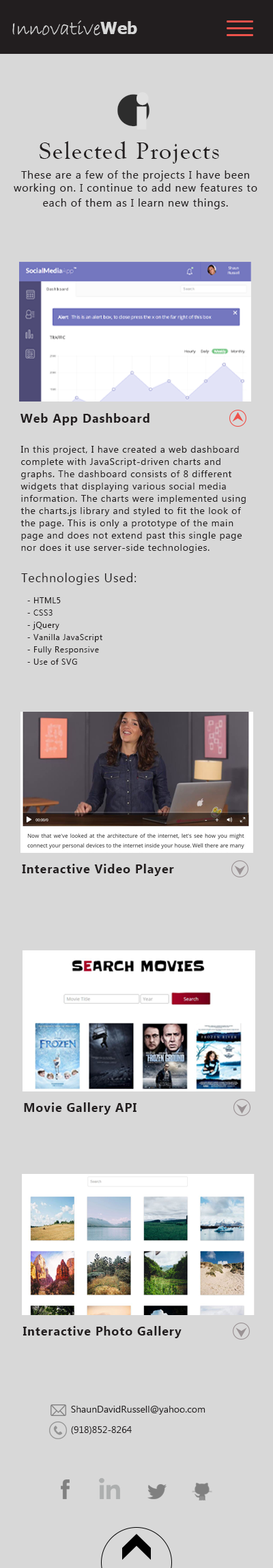
<style>
.page{position:relative;width:273px;height:1568px;background:#d8d8d8}
.page>*{position:absolute;margin:0}
.t1{font:20.5px "BradleyHandITC";color:#d8d8d8}
.t2{font:16.4px "Tahoma-Bold";color:#d8d8d8}
.t3{font:24.5px "GoudyOldStyleT-Regular";letter-spacing:0.05em;color:#221e1f}
.t4{font:10.9px "LaoUI";letter-spacing:0.05em;color:#221e1f}
.t5{font:12.3px "LaoUI-Bold";letter-spacing:0.05em;color:#221e1f}
.t6{font:9.5px/12.3px "LaoUI";letter-spacing:0.05em;color:#221e1f}
.t7{font:12.3px "LaoUI";letter-spacing:0.05em;color:#221e1f}
.t8{font:8.2px/12.3px "LaoUI";letter-spacing:0.05em;color:#221e1f}
.t9{font:9.5px/20.5px "LaoUI";color:#221e1f}
</style>
<div class="page">
<p class="t1" style="left:12px;top:20px;width:125px;height:15px">Innovative<span class="t2">Web</span></p>
<p class="t3" style="left:39px;top:141px;width:180px;height:23px">Selected Projects</p>
<p class="t4" style="left:14px;top:170px;width:243px;height:39px;text-align:center">These are a few of the projects I have been working on. I continue to add new features to each of them as I learn new things.</p>
<p class="t5" style="left:20px;top:413px;width:129px;height:12px">Web App Dashboard</p>
<p class="t6" style="left:20px;top:446px;width:225px;height:107px;text-align:right">In this project, I have created a web dashboard complete with JavaScript-driven charts and graphs. The dashboard consists of 8 different widgets that displaying various social media information. The charts were implemented using the charts.js library and styled to fit the look of the page. This is only a prototype of the main page and does not extend past this single page nor does it use server-side technologies.</p>
<p class="t7" style="left:21px;top:573px;width:115px;height:12px">Technologies Used:</p>
<p class="t8" style="left:27px;top:597px;width:75px;height:68px;text-align:right">- HTML5<br>- CSS3<br>- jQuery<br>- Vanilla JavaScript<br>- Fully Responsive<br>- Use of SVG</p>
<p class="t5" style="left:22px;top:864px;width:152px;height:12px">Interactive Video Player</p>
<p class="t5" style="left:24px;top:1102px;width:112px;height:13px">Movie Gallery API</p>
<p class="t5" style="left:22px;top:1326px;width:159px;height:12px">Interactive Photo Gallery</p>
<p class="t9" style="left:71px;top:1406px;width:134px;height:28px;text-align:right">ShaunDavidRussell@yahoo.com<br>(918)852-8264</p>
</div>
